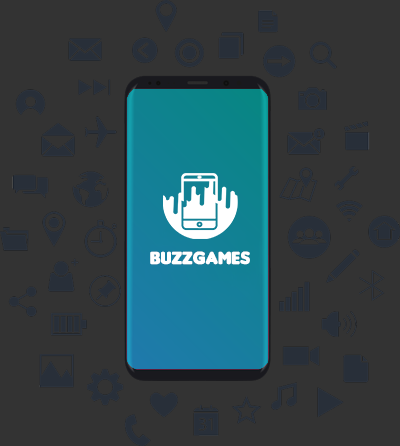
<style>
.page{position:relative;width:400px;height:446px;background:#333333}
.page>*{position:absolute;margin:0}
.t1{font:18.5px "Insaniburger";color:#ffffff;font-weight:bold}
</style>
<div class="page">
<p class="t1" style="left:150px;top:251px;width:100px;height:14px">Buzzgames</p>
</div>
